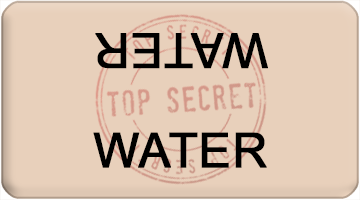
<style>
.page{position:relative;width:360px;height:200px;background:#e8d0bb}
.page>*{position:absolute;margin:0}
.t1{font:48px "ArialMT";color:#000000;font-weight:bold}
</style>
<div class="page">
<p class="t1" style="left:95px;top:33px;width:173px;height:36px;rotate:180deg">WATER</p>
<p class="t1" style="left:93px;top:132px;width:174px;height:36px">WATER</p>
</div>
